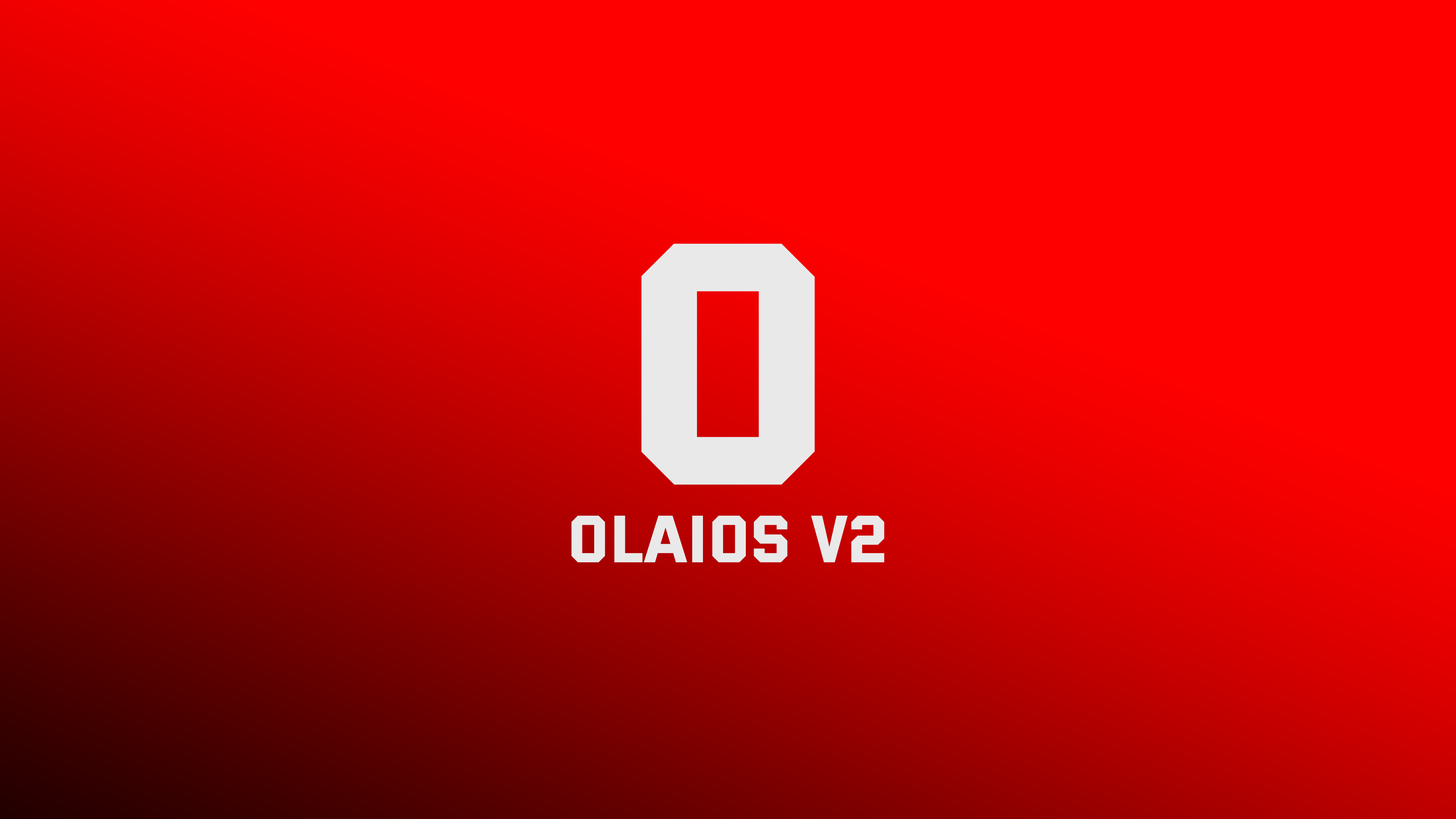
<style>
.page{position:relative;width:1456px;height:819px;background:#ff0000}
.page>*{position:absolute;margin:0}
.t1{font:345.1px "Versa-Versa";color:#e9e9e9}
.t2{font:66.8px "Versa-Versa";color:#e9e9e9}
</style>
<div class="page">
<p class="t1" style="left:641px;top:243px;width:174px;height:242px">O</p>
<p class="t2" style="left:571px;top:516px;width:314px;height:47px">OLAIOS v2</p>
</div>
